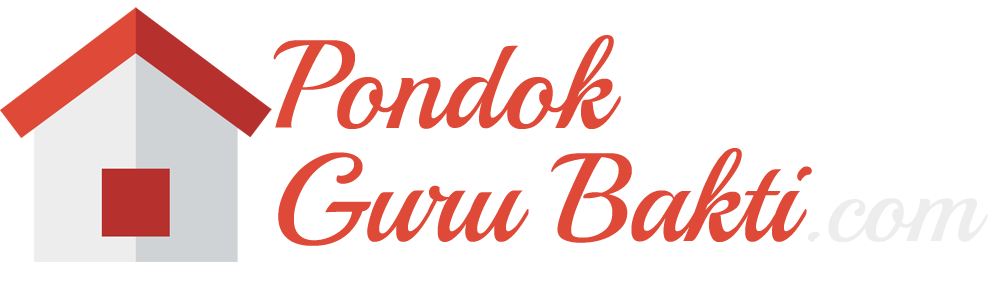
<style>
.page{position:relative;width:989px;height:283px;background:#ffffff}
.page>*{position:absolute;margin:0}
.t1{font:124.8px/22.5px "Playball-Regular";color:#df4937}
.t2{font:104.8px/22.5px "Playball-Regular";color:#eeeded}
</style>
<div class="page">
<p class="t1" style="left:273px;top:35px;width:715px;height:211px">Pondok <br><br><br><br><br>Guru Bakti<span class="t2">.com</span></p>
</div>
